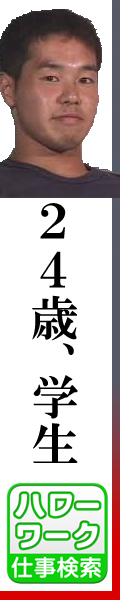
<style>
.page{position:relative;width:120px;height:600px;background:#ffffff}
.page>*{position:absolute;margin:0}
.t1{font:48px "HGMinchoE";color:#000000}
</style>
<div class="page">
<p class="t1" style="left:32px;top:203px;width:45px;height:152px">２４歳、<br>学生</p>
<p class="t1" style="left:33px;top:375px;width:45px;height:88px">学生</p>
</div>
